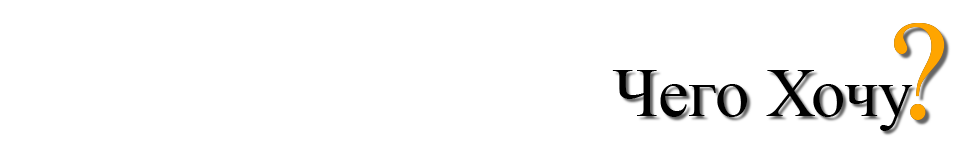
<style>
.page{position:relative;width:960px;height:141px;background:#ffffff}
.page>*{position:absolute;margin:0}
.t1{font:138.6px "TimesNewRomanPSMT";color:#ffa500}
.t2{font:69px "TimesNewRomanPSMT";color:#000000}
</style>
<div class="page">
<p class="t1" style="left:894px;top:23px;width:51px;height:97px">?</p>
<p class="t1" style="left:894px;top:23px;width:51px;height:97px">?</p>
<p class="t2" style="left:612px;top:70px;width:301px;height:61px">Чего Хочу</p>
</div>
